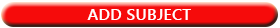
<style>
.page{position:relative;width:280px;height:28px;background:#f60b0b}
.page>*{position:absolute;margin:0}
.t1{font:16.4px "YuGothicUI-Bold";color:#ffffff}
</style>
<div class="page">
<p class="t1" style="left:87px;top:9px;width:104px;height:11px">ADD SUBJECT</p>
</div>
